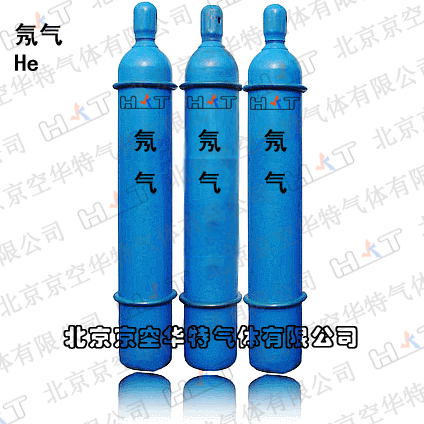
<style>
.page{position:relative;width:424px;height:424px;background:#ffffff}
.page>*{position:absolute;margin:0}
.t1{font:24px/14px "SimHei";color:#000000;font-weight:bold}
.t2{font:24px "STCaiyun";color:#000000;font-weight:bold}
</style>
<div class="page">
<p class="t1" style="left:15px;top:23px;width:48px;height:48px">氖气<br><br>He</p>
<p class="t1" style="left:134px;top:129px;width:23px;height:65px">氖<br><br><br>气</p>
<p class="t1" style="left:198px;top:129px;width:23px;height:65px">氖<br><br><br>气</p>
<p class="t1" style="left:264px;top:129px;width:23px;height:65px">氖<br><br><br>气</p>
<p class="t2" style="left:63px;top:325px;width:295px;height:24px">北京京空华特气体有限公司</p>
</div>
